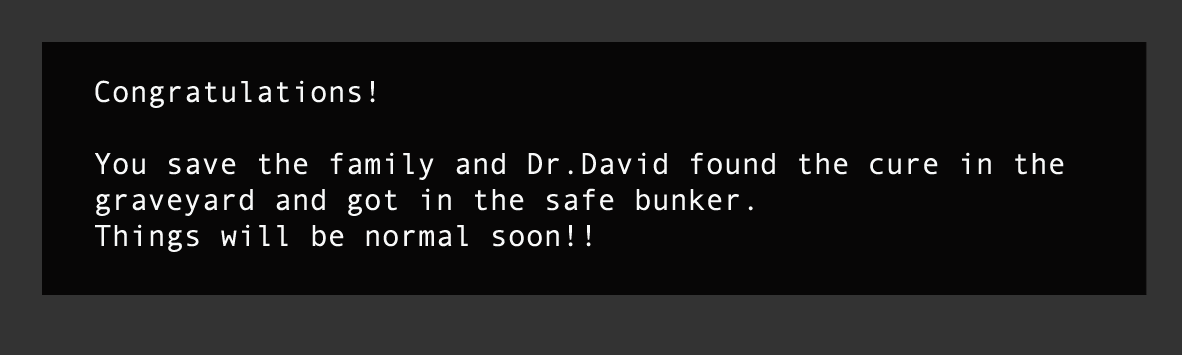
<style>
.page{position:relative;width:1182px;height:355px;background:#070606}
.page>*{position:absolute;margin:0}
.t1{font:30px "AndaleMono";color:#f8f9f9}
</style>
<div class="page">
<p class="t1" style="left:95px;top:80px;width:969px;height:172px">Congratulations!<br><br>You save the family and Dr.David found the cure in the <br>graveyard and got in the safe bunker. <br>Things will be normal soon!!</p>
</div>
